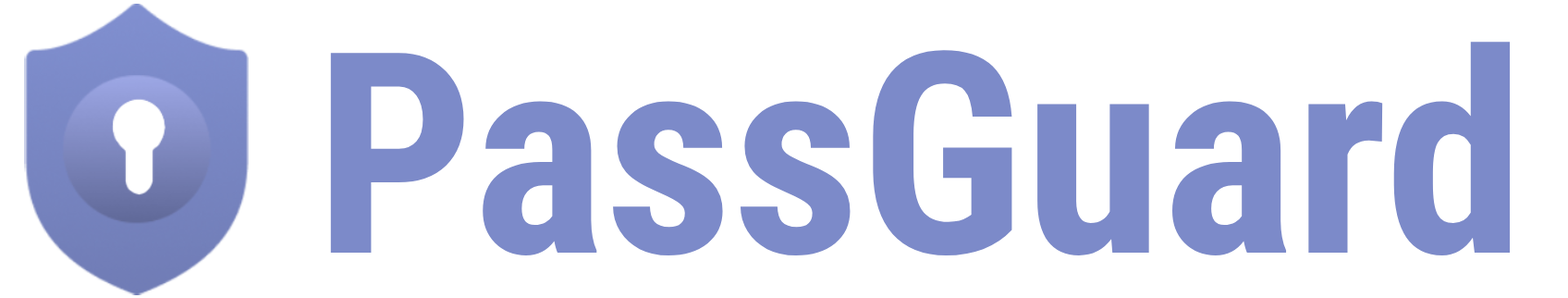
<style>
.page{position:relative;width:1568px;height:298px;background:#ffffff}
.page>*{position:absolute;margin:0}
.t1{font:280.7px "RobotoCondensed-Bold";color:#7c8ac9}
</style>
<div class="page">
<p class="t1" style="left:330px;top:42px;width:1181px;height:213px">PassGuard</p>
</div>
